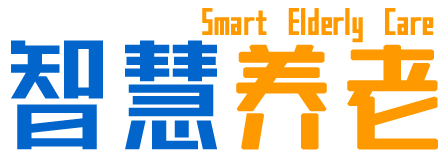
<style>
.page{position:relative;width:442px;height:154px;background:#ffffff}
.page>*{position:absolute;margin:0}
.t1{font:36px "113-SSXuanZhengiTi";color:#fe9900;font-weight:bold}
.t2{font:120px "113-SSXuanZhengiTi";color:#0265cb;scale:1.39 1}
.t3{font:112.3px "113-SSXuanZhengiTi";color:#fe9900;font-weight:bold;scale:1.39 1}
</style>
<div class="page">
<p class="t1" style="left:202px;top:8px;width:232px;height:35px">Smart Elderly Care</p>
<p class="t2" style="left:11px;top:40px;width:427px;height:110px">智慧<span class="t3">养老</span></p>
</div>
